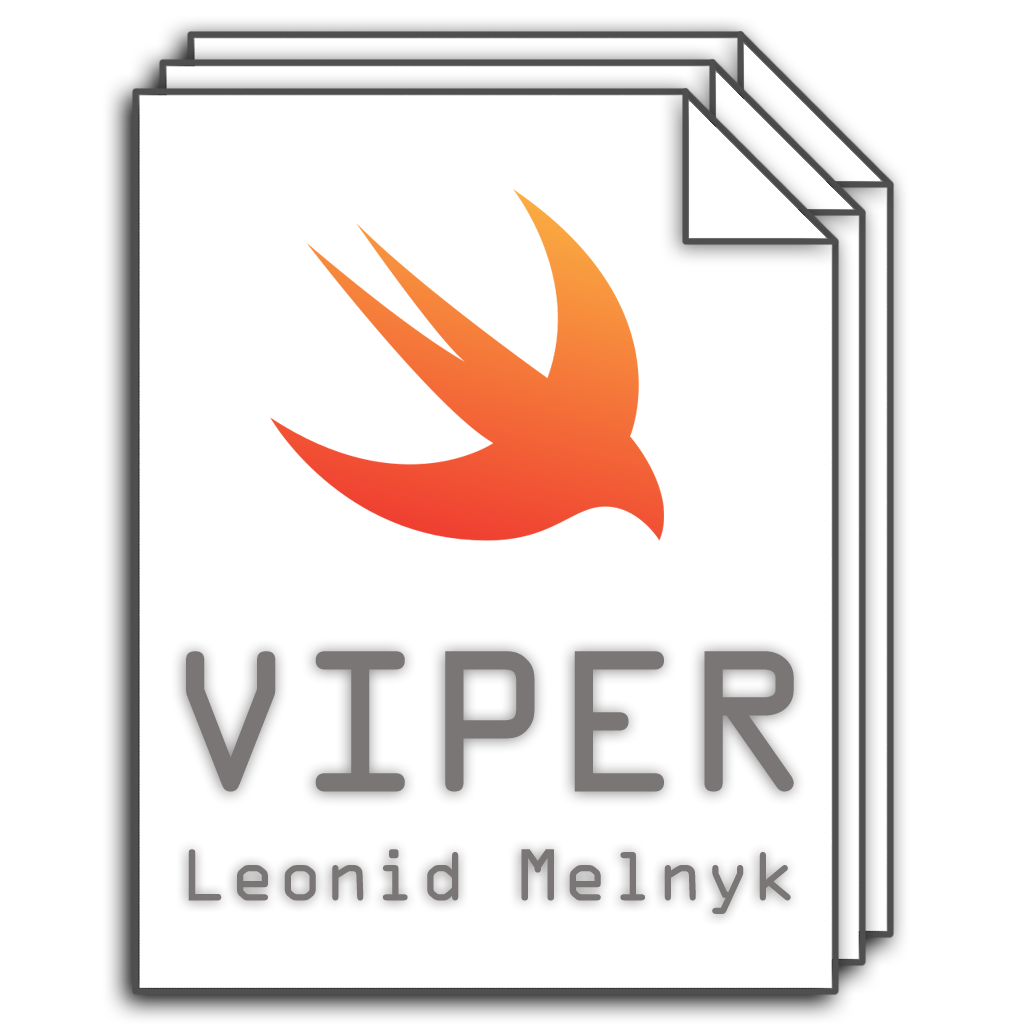
<style>
.page{position:relative;width:1024px;height:1024px;background:#ffffff}
.page>*{position:absolute;margin:0}
.t1{font:180px "OCRAStd";color:#7b7676}
.t2{font:66px "OCRAStd";color:#7b7676}
</style>
<div class="page">
<p class="t1" style="left:186px;top:651px;width:608px;height:141px">VIPER</p>
<p class="t2" style="left:188px;top:849px;width:603px;height:65px">Leonid Melnyk</p>
</div>
